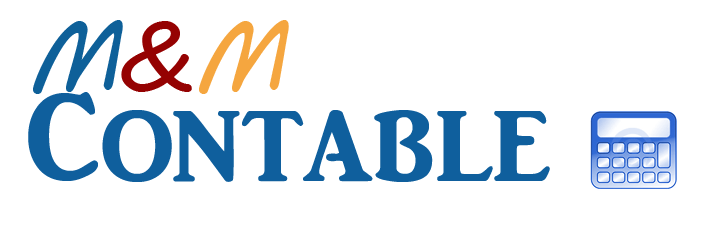
<style>
.page{position:relative;width:716px;height:225px;background:#ffffff}
.page>*{position:absolute;margin:0}
.t1{font:100px "MVBoli";color:#0e6099}
.t2{font:100px "MVBoli";color:#950202}
.t3{font:100px "MVBoli";color:#f5a63f}
.t4{font:130px "ARJULIAN";color:#0f5f9d}
</style>
<div class="page">
<p class="t1" style="left:33px;top:20px;width:256px;height:74px">M<span class="t2">&amp;</span><span class="t3">M</span></p>
<p class="t4" style="left:28px;top:92px;width:522px;height:90px">Contable</p>
</div>
